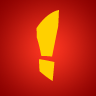
<style>
.page{position:relative;width:96px;height:96px}
.page>*{position:absolute;margin:0}
.t1{font:72px "Arial-Black";color:#ffd000}
</style>
<div class="page">
<p class="t1" style="left:36px;top:10px;width:23px;height:71px">!</p>
</div>
